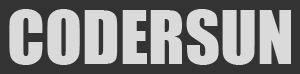
<style>
.page{position:relative;width:300px;height:74px;background:#dadada}
.page>*{position:absolute;margin:0}
.t1{font:68px "Impact";color:#dadada}
</style>
<div class="page">
<p class="t1" style="left:9px;top:9px;width:282px;height:56px">CODERSUN</p>
</div>
